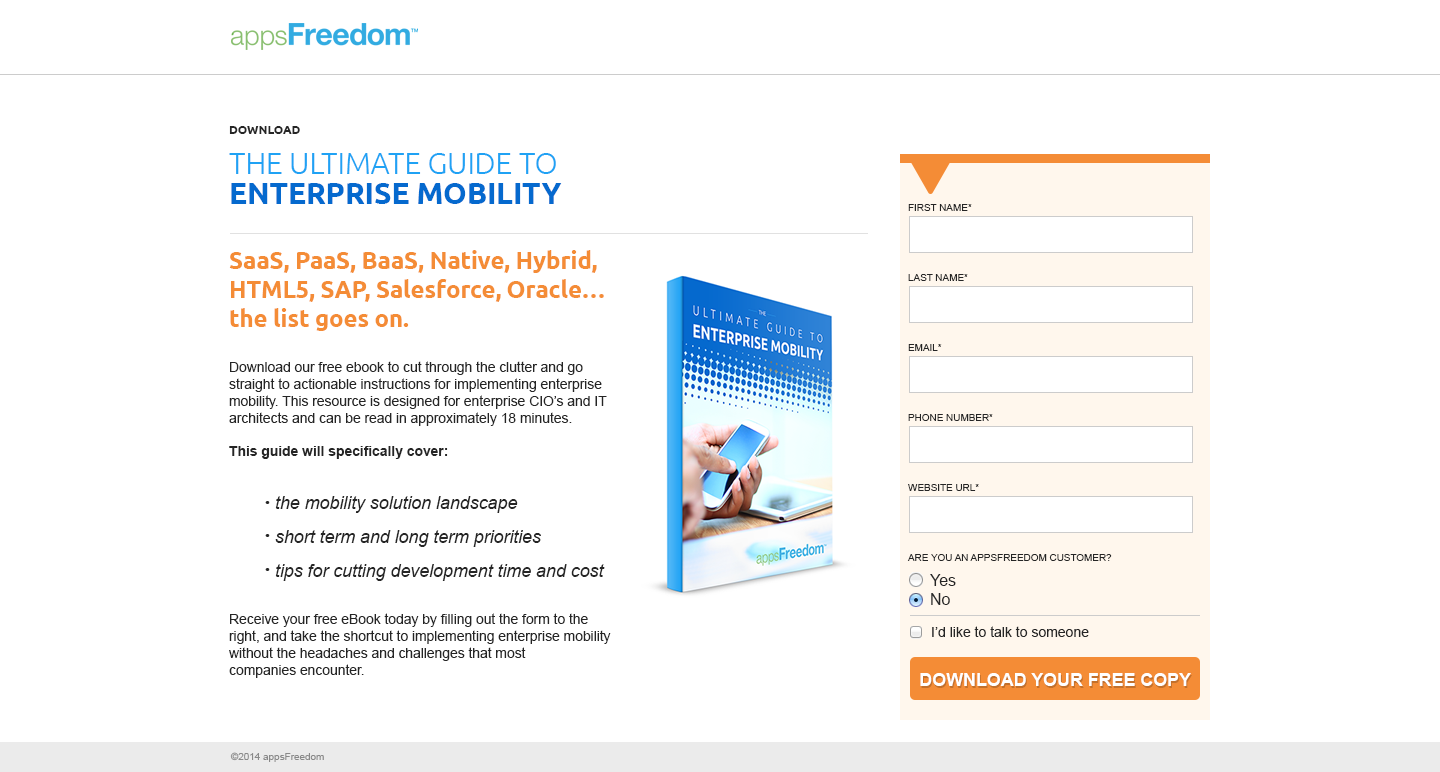
<style>
.page{position:relative;width:1440px;height:772px;background:#ffffff}
.page>*{position:absolute;margin:0}
.t1{font:14px "ArialMT";letter-spacing:-0.005em;color:#252525}
.t2{font:12px/40px "Ubuntu-Bold";letter-spacing:-0.005em;color:#252525;text-transform:uppercase}
.t3{font:30px/40px "Ubuntu-Light";letter-spacing:-0.005em;color:#1fa2f4;text-transform:uppercase}
.t4{font:30px/30px "Ubuntu-Bold";letter-spacing:-0.005em;color:#0569ce;text-transform:uppercase}
.t5{font:24px "Ubuntu-Bold";letter-spacing:-0.005em;color:#f48c36}
.t6{font:14px "Arial-BoldMT";letter-spacing:-0.005em;color:#252525}
.t7{font:10px "ArialMT";letter-spacing:-0.005em;color:#252525;text-transform:uppercase}
.t8{font:18px/34px "Arial-ItalicMT";letter-spacing:-0.005em;color:#252525}
.t9{font:16px "ArialMT";color:#252525}
.t10{font:14px "ArialMT";color:#252525}
.t11{font:18px "Arial-BoldMT";letter-spacing:-0.005em;color:#ffffff;text-transform:uppercase}
.t12{font:10px "ArialMT";letter-spacing:-0.005em;color:#898989}
</style>
<div class="page">
<p class="t1" style="left:229px;top:126px;width:382px;height:552px"><span class="t2">Download <br></span><span class="t3">the Ultimate Guide to <br></span><span class="t4">Enterprise Mobility<br><br></span><span class="t5">SaaS, PaaS, BaaS, Native, Hybrid, <br>HTML5, SAP, Salesforce, Oracle…<br>the list goes on.<br><br></span>Download our free ebook to cut through the clutter and go <br>straight to actionable instructions for implementing enterprise <br>mobility. This resource is designed for enterprise CIO’s and IT <br>architects and can be read in approximately 18 minutes.<br><br><span class="t6">This guide will specifically cover:<br></span><br><br> •<br><br> •<br><br> •<br><br><br>Receive your free eBook today by filling out the form to the <br>right, and take the shortcut to implementing enterprise mobility <br>without the headaches and challenges that most <br>companies encounter.</p>
<p class="t7" style="left:908px;top:204px;width:64px;height:7px">First name*</p>
<p class="t7" style="left:908px;top:274px;width:60px;height:7px">Last name*</p>
<p class="t7" style="left:908px;top:344px;width:34px;height:7px">email*</p>
<p class="t7" style="left:908px;top:414px;width:85px;height:7px">phone number*</p>
<p class="t7" style="left:908px;top:484px;width:71px;height:7px">website url*</p>
<p class="t8" style="left:275px;top:496px;width:330px;height:85px">the mobility solution landscape<br>short term and long term priorities<br>tips for cutting development time and cost</p>
<p class="t7" style="left:907px;top:554px;width:205px;height:7px">Are you an appsfreedom customer?</p>
<p class="t9" style="left:930px;top:574px;width:26px;height:31px">Yes<br>No</p>
<p class="t10" style="left:932px;top:626px;width:157px;height:11px">I’d like to talk to someone</p>
<p class="t11" style="left:920px;top:673px;width:271px;height:13px">Download Your Free Copy</p>
<p class="t12" style="left:230px;top:752px;width:94px;height:10px">©2014 appsFreedom</p>
</div>
